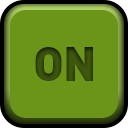
<style>
.page{position:relative;width:128px;height:128px;background:#6b9519}
.page>*{position:absolute;margin:0}
.t1{font:48px "DIN-Black";color:#3e570e}
</style>
<div class="page">
<p class="t1" style="left:35px;top:47px;width:58px;height:34px">ON</p>
</div>
